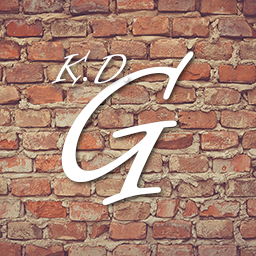
<style>
.page{position:relative;width:256px;height:256px}
.page>*{position:absolute;margin:0}
.t1{font:48px "InformalRoman-Regular";color:#ffffff}
.t2{font:200px "InformalRoman-Regular";color:#ffffff}
</style>
<div class="page">
<p class="t1" style="left:51px;top:50px;width:77px;height:36px">K.D.</p>
<p class="t2" style="left:61px;top:51px;width:133px;height:154px">G</p>
</div>
